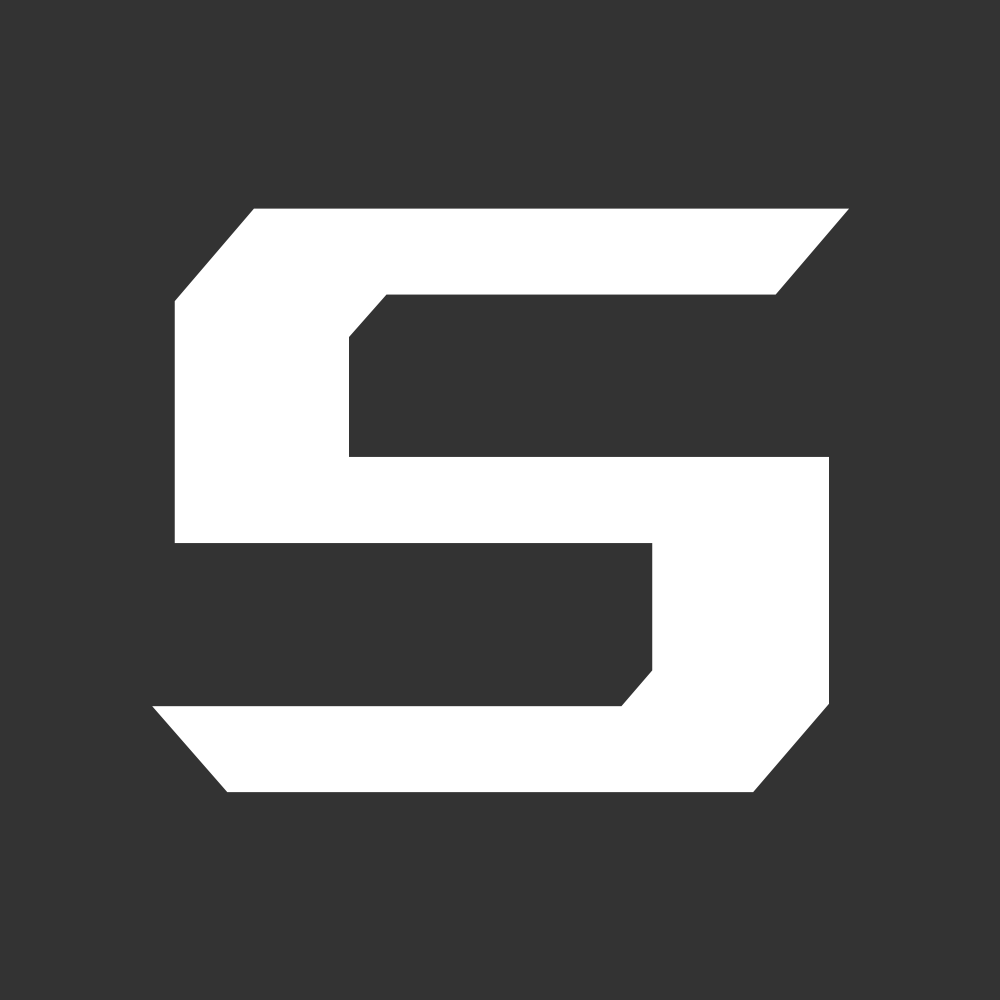
<style>
.page{position:relative;width:1000px;height:1000px;background:#333333}
.page>*{position:absolute;margin:0}
.t1{font:833.3px "ROGFonts-Regular";color:#ffffff}
</style>
<div class="page">
<p class="t1" style="left:152px;top:208px;width:697px;height:585px">S</p>
</div>
